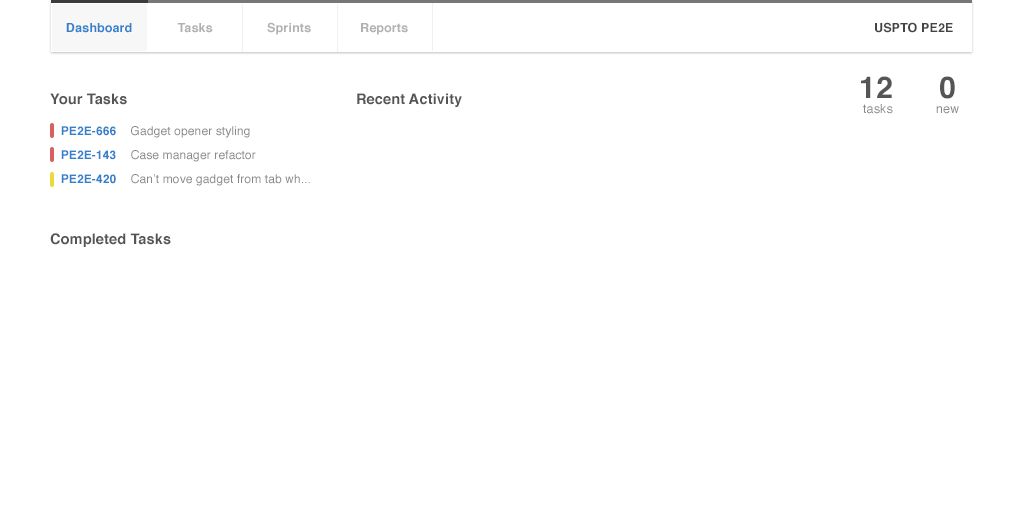
<style>
.page{position:relative;width:1024px;height:525px;background:#ffffff}
.page>*{position:absolute;margin:0}
.t1{font:12.5px "Helvetica-Bold";letter-spacing:0.01em;color:#3380cc}
.t2{font:12.5px "Helvetica-Bold";letter-spacing:0.01em;color:#b1b1b1}
.t3{font:12.5px "Helvetica-Bold";letter-spacing:0.01em;color:#444444}
.t4{font:30px "Helvetica-Bold";letter-spacing:0.01em;color:#555555}
.t5{font:14.5px "Helvetica-Bold";letter-spacing:0.01em;color:#555555}
.t6{font:12.5px "Helvetica";letter-spacing:0.01em;color:#888888}
.t7{font:12px/24px "Helvetica-Bold";letter-spacing:0.01em;color:#3380cc}
.t8{font:12px/24px "Helvetica";letter-spacing:0.01em;color:#888888}
</style>
<div class="page">
<p class="t1" style="left:66px;top:23px;width:66px;height:10px">Dashboard</p>
<p class="t2" style="left:177px;top:23px;width:36px;height:10px">Tasks</p>
<p class="t2" style="left:267px;top:22px;width:44px;height:13px">Sprints</p>
<p class="t2" style="left:361px;top:23px;width:47px;height:12px">Reports</p>
<p class="t3" style="left:875px;top:22px;width:78px;height:11px">USPTO PE2E</p>
<p class="t4" style="left:861px;top:76px;width:31px;height:22px">12</p>
<p class="t4" style="left:940px;top:76px;width:15px;height:23px">0</p>
<p class="t5" style="left:50px;top:93px;width:77px;height:12px">Your Tasks</p>
<p class="t5" style="left:357px;top:93px;width:105px;height:14px">Recent Activity</p>
<p class="t6" style="left:863px;top:104px;width:30px;height:10px">tasks</p>
<p class="t6" style="left:936px;top:106px;width:23px;height:8px">new</p>
<p class="t7" style="left:61px;top:126px;width:55px;height:58px">PE2E-666<br>PE2E-143<br>PE2E-420</p>
<p class="t8" style="left:131px;top:126px;width:179px;height:60px">Gadget opener styling<br>Case manager refactor<br>Can’t move gadget from tab wh...</p>
<p class="t5" style="left:50px;top:233px;width:121px;height:14px">Completed Tasks</p>
</div>
